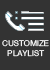
<style>
.page{position:relative;width:50px;height:70px;background:#333333}
.page>*{position:absolute;margin:0}
.t1{font:8px "Helvetica"}
</style>
<div class="page">
<p class="t1" style="left:2px;top:40px;width:47px;height:17px;text-align:center">CUSTOMIZE<br>PLAYLIST</p>
</div>
